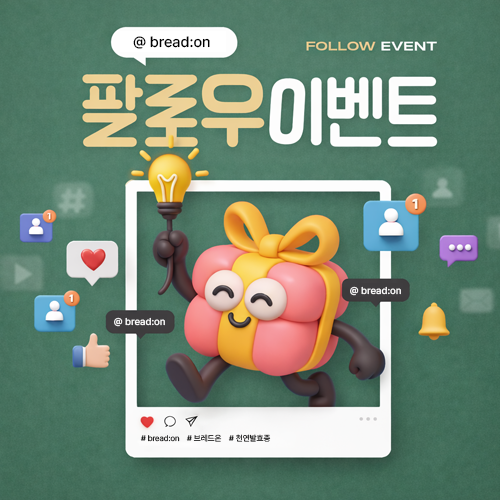
<style>
.page{position:relative;width:500px;height:500px}
.page>*{position:absolute;margin:0}
.t1{font:15px "Pretendard-Medium";color:#000000}
.t2{font:10px "Pretendard-Medium";color:#ffffff}
.t3{font:8px "Pretendard-Regular"}
</style>
<div class="page">
<p class="t1" style="left:133px;top:36px;width:77px;height:13px">@ bread:on</p>
<p class="t2" style="left:350px;top:286px;width:51px;height:10px">@ bread:on</p>
<p class="t2" style="left:114px;top:317px;width:51px;height:10px">@ bread:on</p>
<p class="t3" style="left:140px;top:435px;width:40px;height:7px"># bread:on</p>
<p class="t3" style="left:186px;top:434px;width:36px;height:8px"># 브레드온</p>
<p class="t3" style="left:228px;top:434px;width:43px;height:8px"># 천연발효종</p>
</div>
